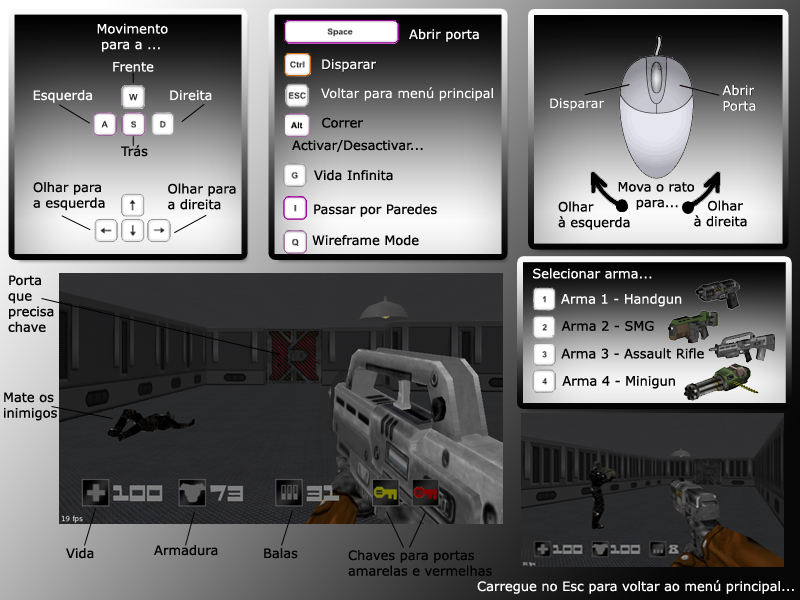
<style>
.page{position:relative;width:800px;height:600px}
.page>*{position:absolute;margin:0}
.t1{font:13px "Verdana";color:#ffffff}
.t2{font:13px "Verdana";color:#000000}
</style>
<div class="page">
<p class="t1" style="left:97px;top:23px;width:71px;height:29px">Movimento<br> para a ...</p>
<p class="t1" style="left:409px;top:29px;width:70px;height:13px">Abrir porta</p>
<p class="t1" style="left:113px;top:62px;width:41px;height:10px">Frente</p>
<p class="t1" style="left:322px;top:59px;width:54px;height:13px">Disparar</p>
<p class="t1" style="left:33px;top:90px;width:59px;height:13px">Esquerda</p>
<p class="t1" style="left:170px;top:90px;width:42px;height:11px">Direita</p>
<p class="t2" style="left:322px;top:117px;width:41px;height:11px">Correr</p>
<p class="t2" style="left:121px;top:145px;width:27px;height:12px">Trás</p>
<p class="t2" style="left:33px;top:182px;width:72px;height:29px">Olhar para<br>a esquerda</p>
<p class="t2" style="left:168px;top:183px;width:68px;height:27px">Olhar para<br>a direita</p>
<p class="t1" style="left:533px;top:268px;width:119px;height:11px">Selecionar arma...</p>
<p class="t2" style="left:8px;top:275px;width:46px;height:57px">Porta<br>que <br>precisa<br>chave</p>
<p class="t1" style="left:561px;top:293px;width:121px;height:14px">Arma 1 - Handgun</p>
<p class="t2" style="left:561px;top:321px;width:93px;height:10px">Arma 2 - SMG</p>
<p class="t2" style="left:561px;top:348px;width:143px;height:11px">Arma 3 - Assault Rifle</p>
<p class="t2" style="left:562px;top:376px;width:113px;height:13px">Arma 4 - Minigun</p>
<p class="t2" style="left:4px;top:392px;width:53px;height:29px">Mate os<br>inimigos</p>
<p class="t2" style="left:154px;top:545px;width:64px;height:11px">Armadura</p>
<p class="t2" style="left:66px;top:548px;width:28px;height:11px">Vida</p>
<p class="t2" style="left:264px;top:548px;width:34px;height:11px">Balas</p>
<p class="t2" style="left:348px;top:550px;width:144px;height:26px">Chaves para portas<br>amarelas e vermelhas</p>
<p class="t1" style="left:477px;top:580px;width:317px;height:14px">Carregue no Esc para voltar ao menú principal...</p>
</div>
